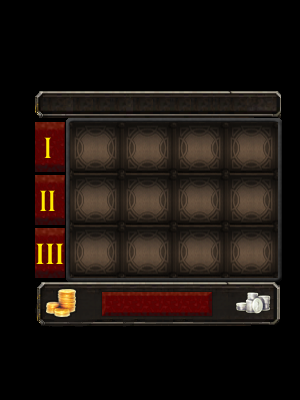
<style>
.page{position:relative;width:300px;height:400px;background:#000000}
.page>*{position:absolute;margin:0}
.t1{font:30.8px "Benguiat";color:#ffea00;scale:0.86 1}
.t2{font:30.8px "Benguiat";color:#ffea00}
</style>
<div class="page">
<p class="t1" style="left:44px;top:137px;width:7px;height:21px">I</p>
<p class="t1" style="left:40px;top:190px;width:15px;height:21px">II</p>
<p class="t2" style="left:36px;top:243px;width:28px;height:21px">III</p>
</div>
